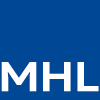
<style>
.page{position:relative;width:100px;height:100px;background:#004795}
.page>*{position:absolute;margin:0}
.t1{font:69.9px "ProductSans-Bold";color:#ffffff;scale:1.18 1}
</style>
<div class="page">
<p class="t1" style="left:1px;top:62px;width:98px;height:30px">MHL</p>
</div>
